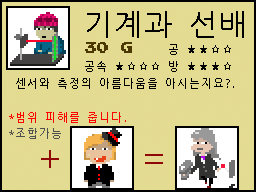
<style>
.page{position:relative;width:256px;height:192px;background:#e4db92}
.page>*{position:absolute;margin:0}
.t1{font:30px "NanumGothicCoding";color:#000000}
.t2{font:12px "PressStart2P";color:#4b3800}
.t3{font:11px "NanumGothicCoding";color:#000000}
.t4{font:11px "NanumGothicCoding";color:#ff0000}
.t5{font:11px "NanumGothicCoding";color:#4f4f4f}
.t6{font:36px "NanumGothicCoding";color:#900707}
</style>
<div class="page">
<p class="t1" style="left:87px;top:11px;width:157px;height:27px">기계과 선배</p>
<p class="t2" style="left:85px;top:42px;width:47px;height:11px">30 G</p>
<p class="t3" style="left:169px;top:44px;width:62px;height:11px">공 ★★☆☆</p>
<p class="t3" style="left:85px;top:61px;width:146px;height:11px">공속 ★☆☆☆ 방 ★★★☆</p>
<p class="t3" style="left:16px;top:78px;width:218px;height:11px">센서와 측정의 아름다움을 아시는지요?.</p>
<p class="t4" style="left:9px;top:112px;width:117px;height:11px">*범위 피해를 줍니다.</p>
<p class="t5" style="left:9px;top:128px;width:52px;height:11px">*조합가능</p>
<p class="t6" style="left:41px;top:150px;width:18px;height:18px">+</p>
<p class="t6" style="left:145px;top:154px;width:18px;height:10px">=</p>
</div>
